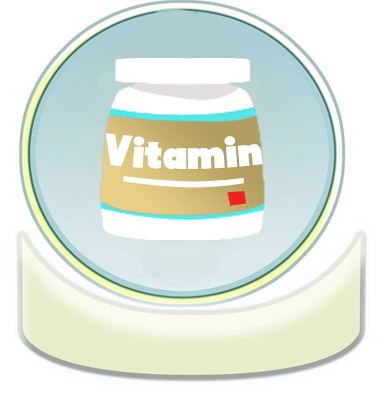
<style>
.page{position:relative;width:383px;height:397px;background:#ffffff}
.page>*{position:absolute;margin:0}
.t1{font:42.9px "Tondu-Beta";color:#ffffff}
</style>
<div class="page">
<p class="t1" style="left:105px;top:133px;width:158px;height:36px">Vitamin</p>
</div>
